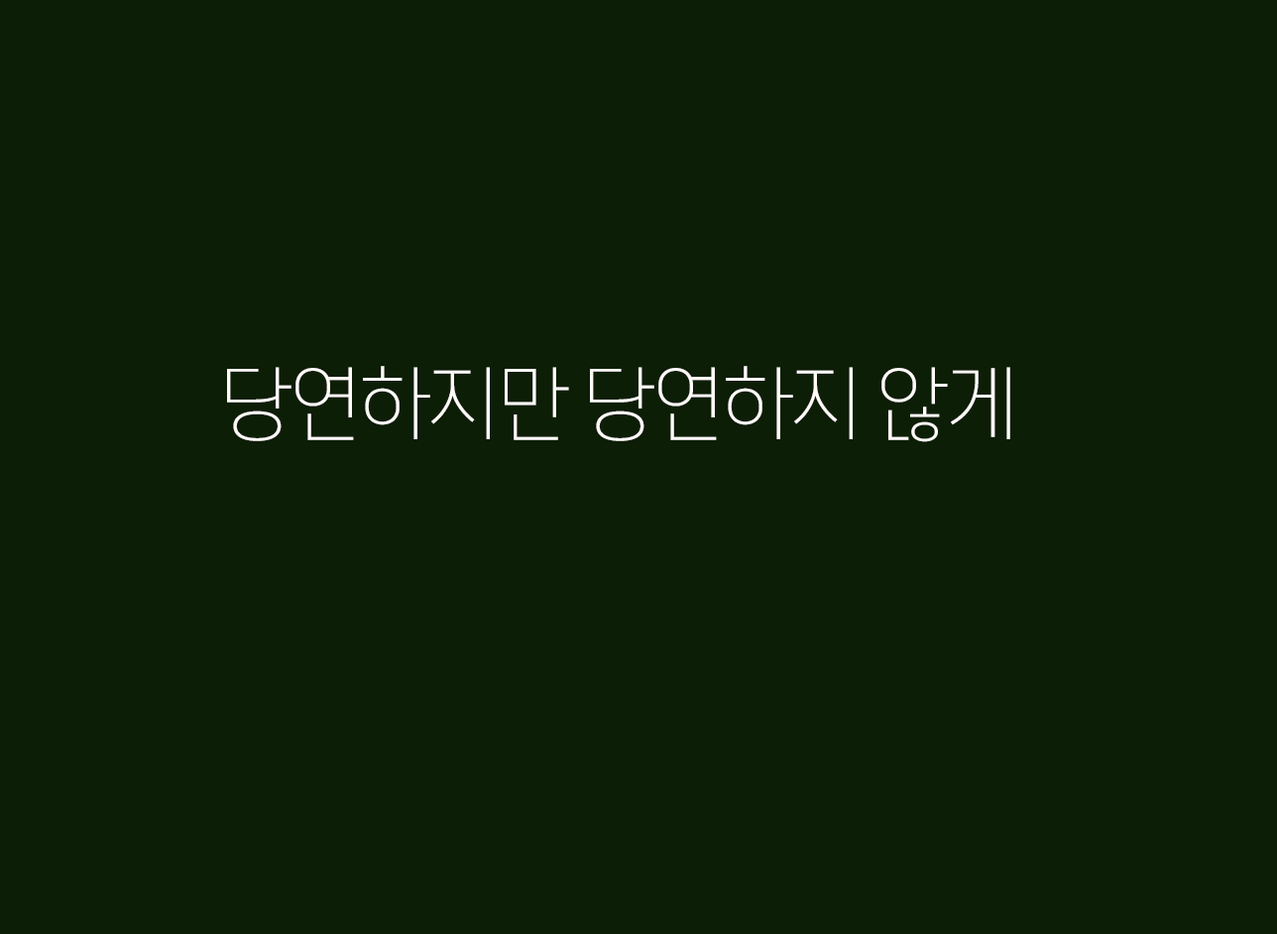
<style>
.page{position:relative;width:1277px;height:934px;background:#0d1e06}
.page>*{position:absolute;margin:0}
.t1{font:81.7px "CoreGothicD-2ExtraLight";letter-spacing:-0.075em;color:#fffaf8}
</style>
<div class="page">
<p class="t1" style="left:227px;top:366px;width:783px;height:76px">당연하지만 당연하지 않게</p>
</div>
